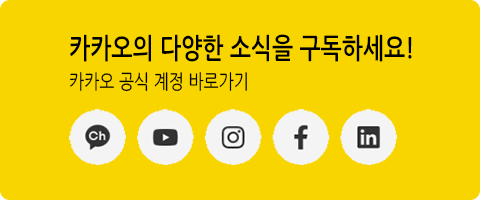
<style>
.page{position:relative;width:480px;height:200px;background:#f9d500}
.page>*{position:absolute;margin:0}
.t1{font:28px "NanumGothicBold";color:#000000;scale:0.8 1}
.t2{font:20px "NanumGothic";color:#000000;scale:0.8 1}
</style>
<div class="page">
<p class="t1" style="left:70px;top:34px;width:342px;height:28px">카카오의 다양한 소식을 구독하세요!</p>
<p class="t2" style="left:69px;top:72px;width:178px;height:20px">카카오 공식 계정 바로가기</p>
</div>
